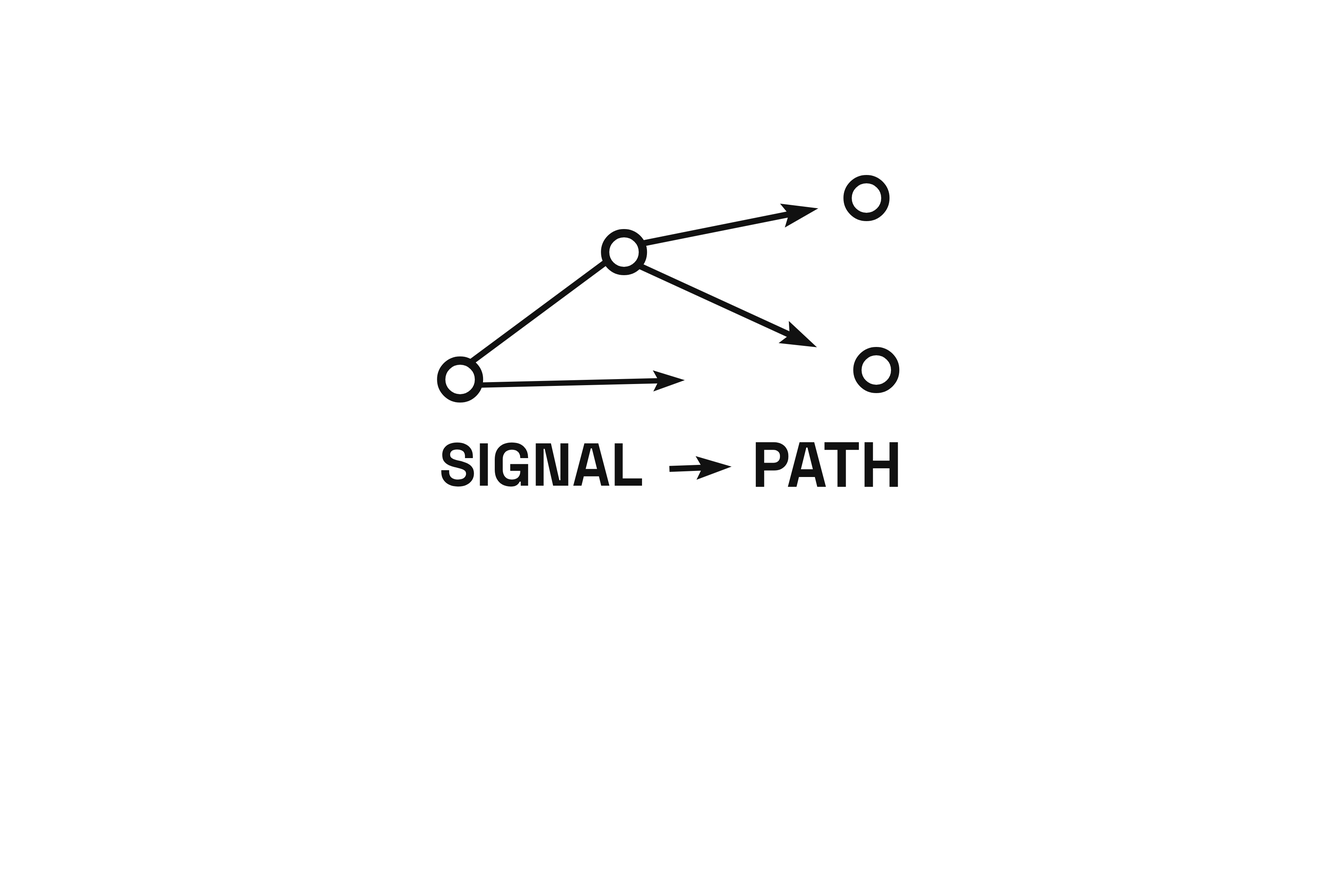
<style>
.page{position:relative;width:1337px;height:892px;background:#ffffff}
.page>*{position:absolute;margin:0}
.t1{font:60.4px "SpaceGroteskLight-Bold";color:#111111}
.t2{font:63.7px "SpaceGroteskLight-Bold";color:#111111}
</style>
<div class="page">
<p class="t1" style="left:441px;top:442px;width:201px;height:45px">SIGNAL</p>
<p class="t2" style="left:756px;top:442px;width:142px;height:45px">PATH</p>
</div>
